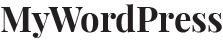
<style>
.page{position:relative;width:223px;height:40px;background:#ffffff}
.page>*{position:absolute;margin:0}
.t1{font:34.6px "PlayfairDisplay-Bold";color:#231f20}
</style>
<div class="page">
<p class="t1" style="left:1px;top:4px;width:221px;height:34px">MyWordPress</p>
</div>
